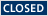
<style>
.page{position:relative;width:48px;height:16px;background:#003366}
.page>*{position:absolute;margin:0}
.t1{font:11px "Frutiger-Bold";color:#ffffff}
</style>
<div class="page">
<p class="t1" style="left:3px;top:4px;width:41px;height:9px">CLOSED</p>
</div>
